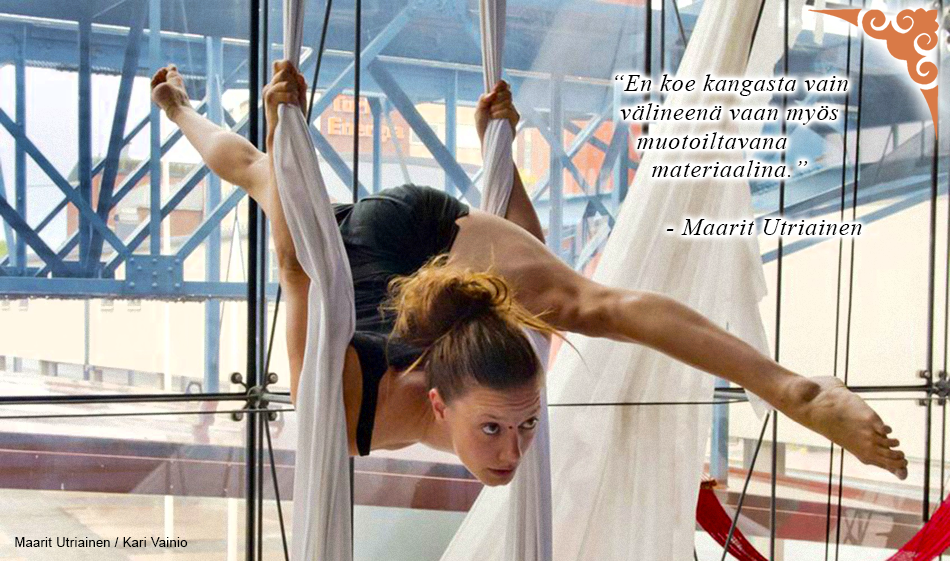
<style>
.page{position:relative;width:950px;height:561px}
.page>*{position:absolute;margin:0}
.t1{font:24px "TimesNewRomanPS-ItalicMT";letter-spacing:0.04em;color:#000000}
.t2{font:12.5px "ArialMT";letter-spacing:0.04em;color:#000000}
</style>
<div class="page">
<p class="t1" style="left:615px;top:74px;width:247px;height:161px;text-align:center">“En koe kangasta vain<br>välineenä vaan myös<br>muotoiltavana     <br>materiaalina.”<br>             <br>          - Maarit Utriainen</p>
<p class="t2" style="left:15px;top:537px;width:173px;height:10px">Maarit Utriainen / Kari Vainio</p>
</div>
